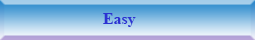
<style>
.page{position:relative;width:255px;height:40px}
.page>*{position:absolute;margin:0}
.t1{font:15.8px "TimesNewRomanPS-BoldMT";color:#2c32d2}
</style>
<div class="page">
<p class="t1" style="left:103px;top:13px;width:33px;height:14px">Easy</p>
</div>
